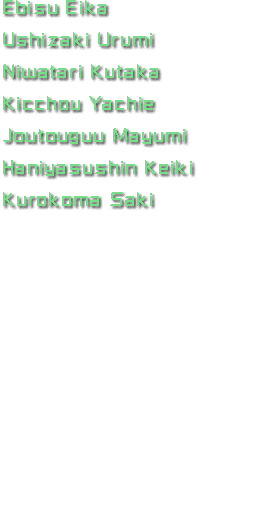
<style>
.page{position:relative;width:256px;height:512px;background:#ffffff}
.page>*{position:absolute;margin:0}
.t1{font:16px/32px "RussellSquare";letter-spacing:0.1em;color:#77dd88}
</style>
<div class="page">
<p class="t1" style="left:3px;top:0px;width:189px;height:206px">Ebisu Eika<br>Ushizaki Urumi<br>Niwatari Kutaka<br>Kicchou Yachie<br>Joutouguu Mayumi<br>Haniyasushin Keiki<br>Kurokoma Saki</p>
</div>
